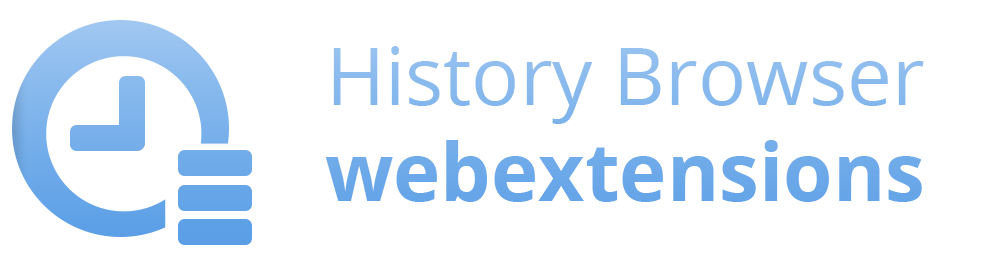
<style>
.page{position:relative;width:996px;height:256px;background:#ffffff}
.page>*{position:absolute;margin:0}
.t1{font:80px "OpenSans"}
.t2{font:80px "OpenSans-Bold"}
</style>
<div class="page">
<p class="t1" style="left:325px;top:46px;width:599px;height:156px;text-align:justify">History Browser<br><span class="t2">webextensions</span></p>
</div>
